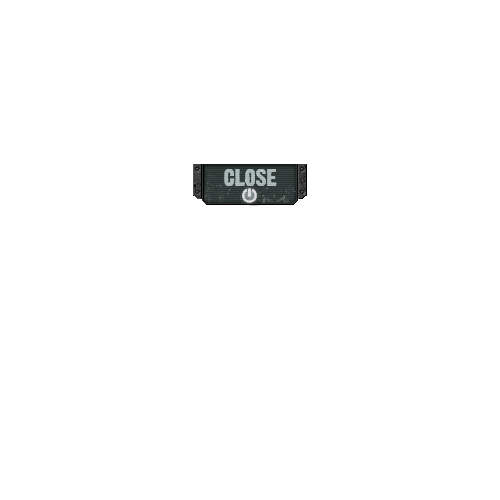
<style>
.page{position:relative;width:500px;height:500px;background:#ffffff}
.page>*{position:absolute;margin:0}
.t1{font:21px "DirtyHeadline";color:#b0b3b3;text-transform:uppercase}
</style>
<div class="page">
<p class="t1" style="left:224px;top:169px;width:53px;height:17px">Close</p>
<p class="t1" style="left:224px;top:169px;width:53px;height:17px;opacity:0.73">Close</p>
</div>
